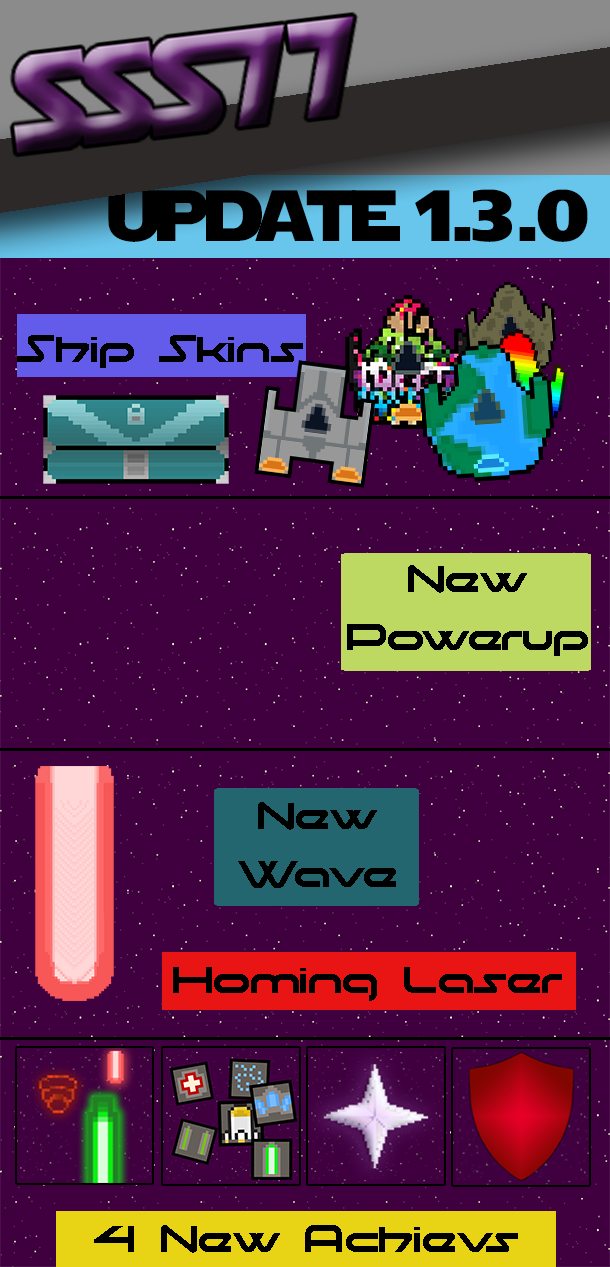
<style>
.page{position:relative;width:610px;height:1267px;background:#400040}
.page>*{position:absolute;margin:0}
.t1{font:72px "StarJedi";color:#000000}
.t2{font:48px "moonhouse";color:#000000}
</style>
<div class="page">
<p class="t1" style="left:108px;top:189px;width:480px;height:53px">update 1.3.0</p>
<p class="t2" style="left:17px;top:335px;width:286px;height:33px">Ship Skins</p>
<p class="t2" style="left:347px;top:565px;width:241px;height:91px;text-align:center">New<br>Powerup</p>
<p class="t2" style="left:238px;top:802px;width:158px;height:86px;text-align:center">New<br>Wave</p>
<p class="t2" style="left:94px;top:1225px;width:424px;height:28px">4 New Achievs</p>
</div>
